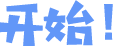
<style>
.page{position:relative;width:113px;height:46px;background:#ffffff}
.page>*{position:absolute;margin:0}
.t1{font:54.2px "HYZhuZiMuTouRenW";color:#6297f8}
</style>
<div class="page">
<p class="t1" style="left:0px;top:0px;width:113px;height:47px">开始！</p>
</div>
